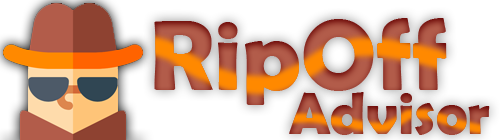
<style>
.page{position:relative;width:500px;height:140px;background:#ffffff}
.page>*{position:absolute;margin:0}
.t1{font:100px "BerlinSansFBDemi-Bold"}
.t2{font:60px "BerlinSansFBDemi-Bold"}
</style>
<div class="page">
<p class="t1" style="left:154px;top:18px;width:293px;height:87px">RipOff</p>
<p class="t2" style="left:289px;top:92px;width:201px;height:43px">Advisor</p>
</div>
